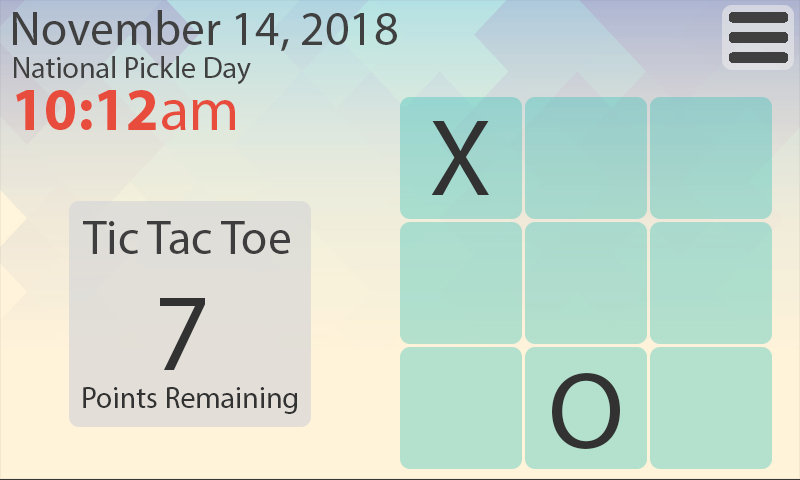
<style>
.page{position:relative;width:800px;height:480px}
.page>*{position:absolute;margin:0}
.t1{font:48px "MyriadPro-Regular";color:#404040}
.t2{font:30px "MyriadPro-Regular";color:#404040}
.t3{font:60px "MyriadPro-Bold";color:#e74c3c}
.t4{font:60px "MyriadPro-Regular";color:#e74c3c}
.t5{font:110px "MyriadPro-Regular";color:#323232}
.t6{font:48px "MyriadPro-Regular";color:#3e3e3e}
.t7{font:30px "MyriadPro-Regular";color:#323232}
</style>
<div class="page">
<p class="t1" style="left:13px;top:10px;width:384px;height:41px">November 14, 2018</p>
<p class="t2" style="left:14px;top:56px;width:237px;height:29px">National Pickle Day</p>
<p class="t3" style="left:16px;top:90px;width:219px;height:40px">10:12<span class="t4">am</span></p>
<p class="t5" style="left:431px;top:121px;width:58px;height:74px">X</p>
<p class="t6" style="left:83px;top:221px;width:207px;height:33px">Tic Tac Toe</p>
<p class="t5" style="left:160px;top:298px;width:45px;height:72px">7</p>
<p class="t5" style="left:552px;top:373px;width:68px;height:76px">O</p>
<p class="t7" style="left:83px;top:387px;width:214px;height:27px">Points Remaining</p>
</div>
